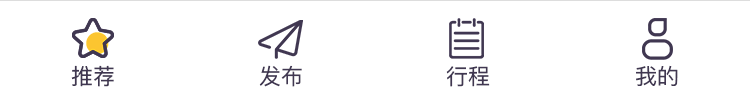
<style>
.page{position:relative;width:750px;height:99px;background:#ffffff}
.page>*{position:absolute;margin:0}
.t1{font:22px "PingFangSC-Regular";color:#403751}
</style>
<div class="page">
<p class="t1" style="left:71px;top:65px;width:43px;height:22px">推荐</p>
<p class="t1" style="left:259px;top:65px;width:43px;height:22px">发布</p>
<p class="t1" style="left:636px;top:65px;width:42px;height:21px">我的</p>
<p class="t1" style="left:446px;top:66px;width:44px;height:21px">行程</p>
</div>
